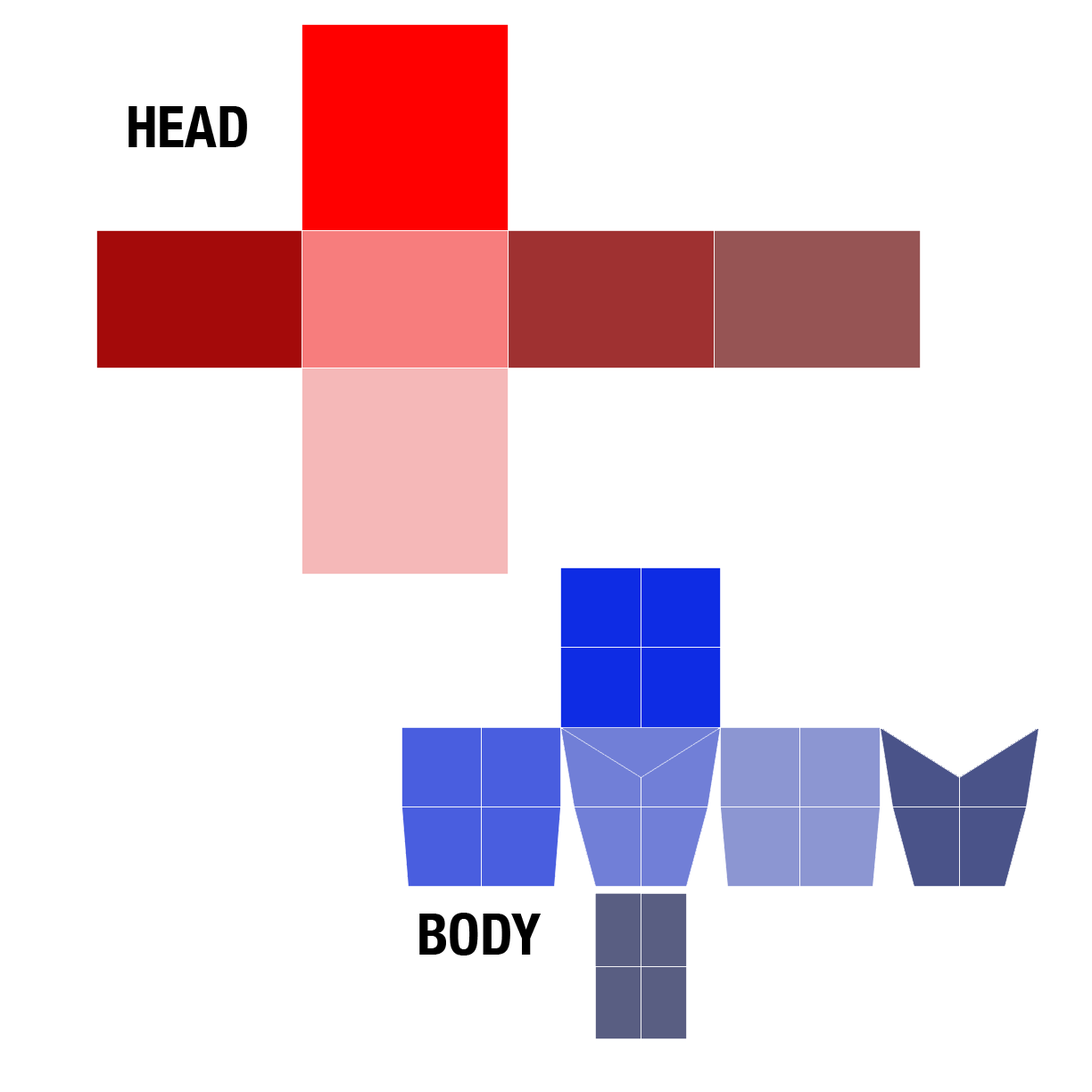
<style>
.page{position:relative;width:1092px;height:1092px;background:#ffffff}
.page>*{position:absolute;margin:0}
.t1{font:57.1px "HelveticaNeue-CondensedBold";color:#000000}
</style>
<div class="page">
<p class="t1" style="left:128px;top:106px;width:119px;height:41px">HEAD</p>
<p class="t1" style="left:419px;top:913px;width:123px;height:42px">BODY</p>
</div>
